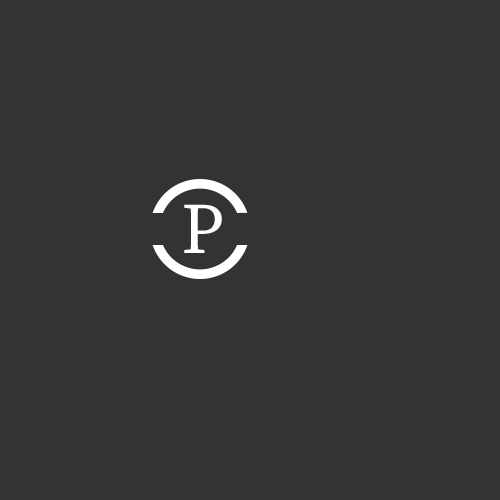
<style>
.page{position:relative;width:500px;height:500px;background:#333333}
.page>*{position:absolute;margin:0}
.t1{font:72px "SourceSerifPro-Regular";color:#ffffff}
</style>
<div class="page">
<p class="t1" style="left:184px;top:204px;width:38px;height:49px">P</p>
</div>
